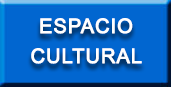
<style>
.page{position:relative;width:171px;height:87px;background:#0166d0}
.page>*{position:absolute;margin:0}
.t1{font:20px/30px "ArialMT";letter-spacing:0.025em;color:#ffffff;font-weight:bold}
</style>
<div class="page">
<p class="t1" style="left:31px;top:18px;width:111px;height:46px;text-align:center">ESPACIO<br>CULTURAL</p>
</div>
